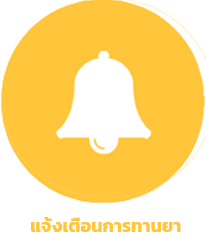
<style>
.page{position:relative;width:206px;height:250px;background:#ffc63c}
.page>*{position:absolute;margin:0}
.t1{font:18px "Kanit-Bold";color:#ffc63c}
</style>
<div class="page">
<p class="t1" style="left:31px;top:217px;width:150px;height:15px">แจ้งเตือนการทานยา</p>
</div>
